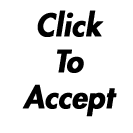
<style>
.page{position:relative;width:133px;height:133px;background:#ffffff}
.page>*{position:absolute;margin:0}
.t1{font:30px "FuturaLT-HeavyOblique";color:#000000;font-weight:bold}
</style>
<div class="page">
<p class="t1" style="left:22px;top:10px;width:95px;height:107px;text-align:center">Click<br>To<br>Accept</p>
</div>
